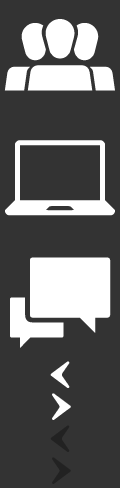
<style>
.page{position:relative;width:120px;height:488px;background:#333333}
.page>*{position:absolute;margin:0}
.t1{font:120px/120px "Sosa-Regular";color:#ffffff}
.t2{font:32px/16px "Sosa-Regular";color:#ffffff}
.t3{font:32px/16px "Sosa-Regular";color:#222222}
</style>
<div class="page">
<p class="t1" style="left:4px;top:19px;width:111px;height:329px;text-align:center">Ý<br>7<br>h</p>
<p class="t2" style="left:50px;top:361px;width:21px;height:59px;text-align:center">‹<br><br>›</p>
<p class="t3" style="left:50px;top:425px;width:21px;height:59px;text-align:center">‹<br><br>›</p>
</div>
